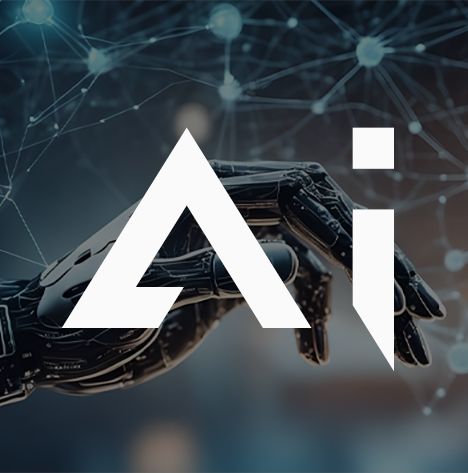
<style>
.page{position:relative;width:468px;height:473px}
.page>*{position:absolute;margin:0}
.t1{font:300px "BordDemo";color:#fafafa}
</style>
<div class="page">
<p class="t1" style="left:61px;top:127px;width:333px;height:244px">AI</p>
</div>
